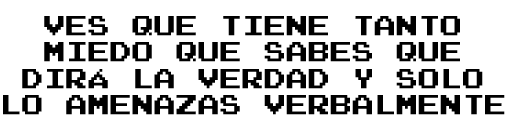
<style>
.page{position:relative;width:513px;height:131px;background:#ffffff}
.page>*{position:absolute;margin:0}
.t1{font:22px "PressStart2P";color:#000000}
</style>
<div class="page">
<p class="t1" style="left:3px;top:16px;width:502px;height:99px;text-align:center">VES QUE TIENE TANTO<br>MIEDO QUE SABES QUE<br>DIRÁ LA VERDAD Y SOLO<br>LO AMENAZAS VERBALMENTE</p>
</div>
